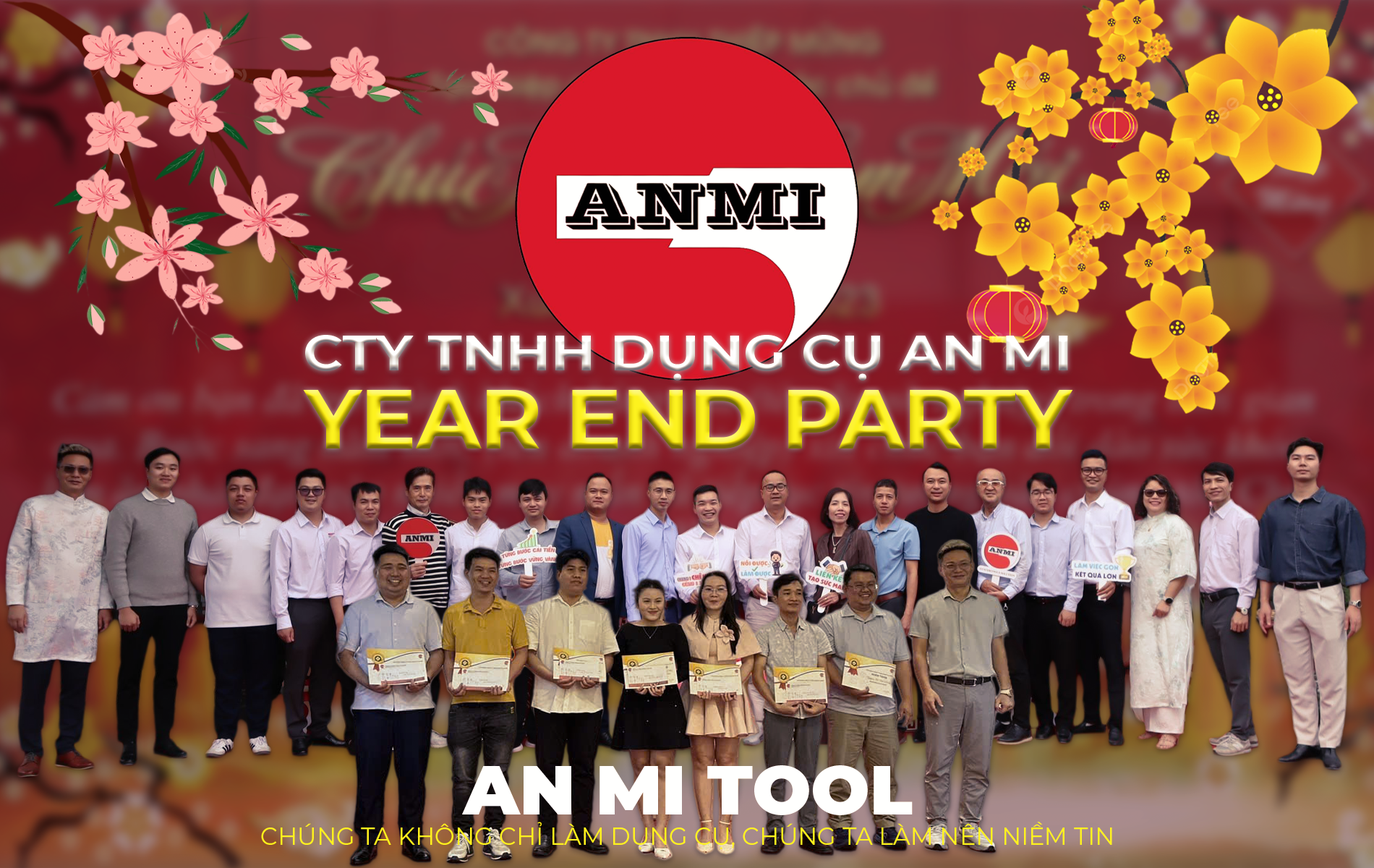
<style>
.page{position:relative;width:1374px;height:868px}
.page>*{position:absolute;margin:0}
.t1{font:48.2px "Montserrat-Bold";scale:1.1 1}
.t2{font:83.6px "Montserrat-Bold"}
.t3{font:69.4px "Montserrat-Black";color:#ffffff}
.t4{font:24.1px "Montserrat-Regular";color:#fdf21e}
</style>
<div class="page">
<p class="t1" style="left:305px;top:335px;width:763px;height:45px">CTY TNHH DỤNG CỤ AN MI</p>
<p class="t2" style="left:303px;top:389px;width:770px;height:60px">YEAR END PARTY</p>
<p class="t3" style="left:462px;top:765px;width:451px;height:50px">AN MI TOOL</p>
<p class="t4" style="left:261px;top:822px;width:851px;height:27px">CHÚNG TA KHÔNG CHỈ LÀM DỤNG CỤ, CHÚNG TA LÀM NÊN NIỀM TIN</p>
</div>
